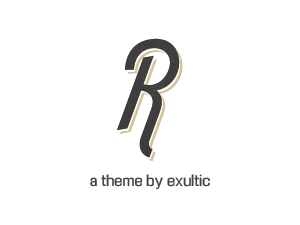
<style>
.page{position:relative;width:300px;height:225px;background:#ffffff}
.page>*{position:absolute;margin:0}
.t1{font:15px "EnigmaticUnicode";color:#444444}
</style>
<div class="page">
<p class="t1" style="left:90px;top:174px;width:120px;height:16px">a theme by exultic</p>
</div>
